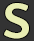
<style>
.page{position:relative;width:34px;height:41px;background:#333333}
.page>*{position:absolute;margin:0}
.t1{font:50px "Signika-Semibold";color:#e8edb3}
</style>
<div class="page">
<p class="t1" style="left:4px;top:3px;width:25px;height:36px">S</p>
</div>
